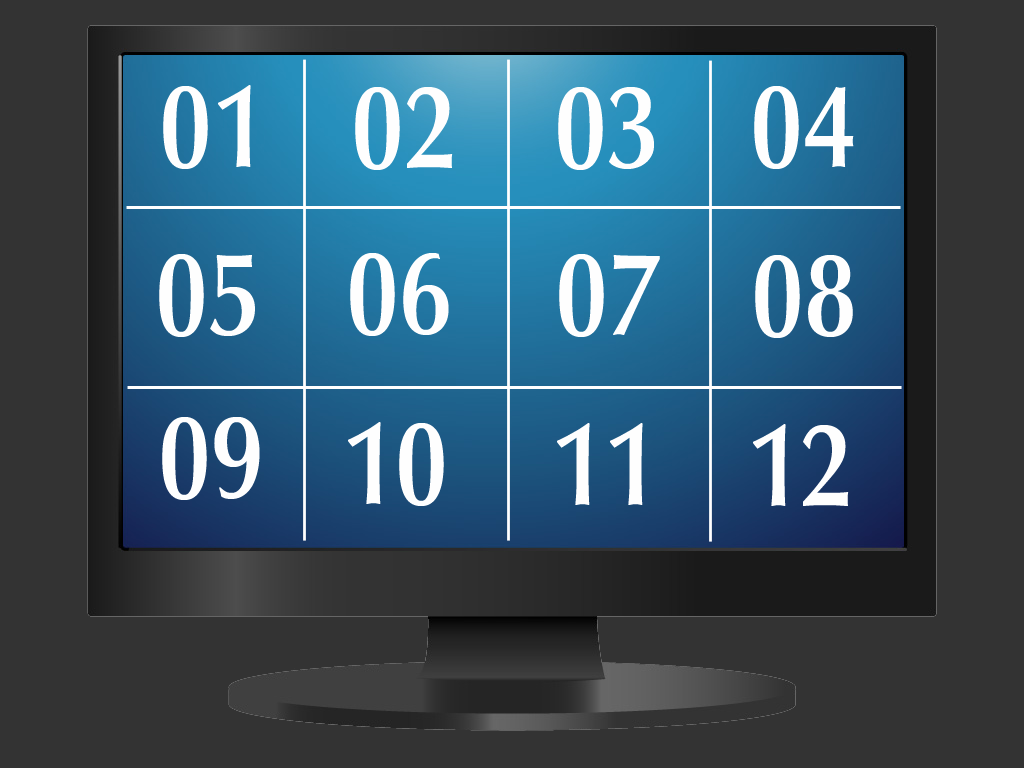
<style>
.page{position:relative;width:1024px;height:768px;background:#333333}
.page>*{position:absolute;margin:0}
.t1{font:120px "OptimaLTStd-DemiBold";color:#fefefe;scale:0.85 1}
</style>
<div class="page">
<p class="t1" style="left:163px;top:85px;width:88px;height:84px">01</p>
<p class="t1" style="left:355px;top:87px;width:98px;height:83px">02</p>
<p class="t1" style="left:558px;top:87px;width:96px;height:83px">03</p>
<p class="t1" style="left:754px;top:86px;width:100px;height:83px">04</p>
<p class="t1" style="left:159px;top:254px;width:96px;height:83px">05</p>
<p class="t1" style="left:350px;top:253px;width:99px;height:83px">06</p>
<p class="t1" style="left:559px;top:254px;width:101px;height:83px">07</p>
<p class="t1" style="left:755px;top:255px;width:98px;height:83px">08</p>
<p class="t1" style="left:162px;top:417px;width:98px;height:83px">09</p>
<p class="t1" style="left:348px;top:422px;width:96px;height:84px">10</p>
<p class="t1" style="left:557px;top:423px;width:86px;height:82px">11</p>
<p class="t1" style="left:753px;top:424px;width:96px;height:82px">12</p>
</div>
